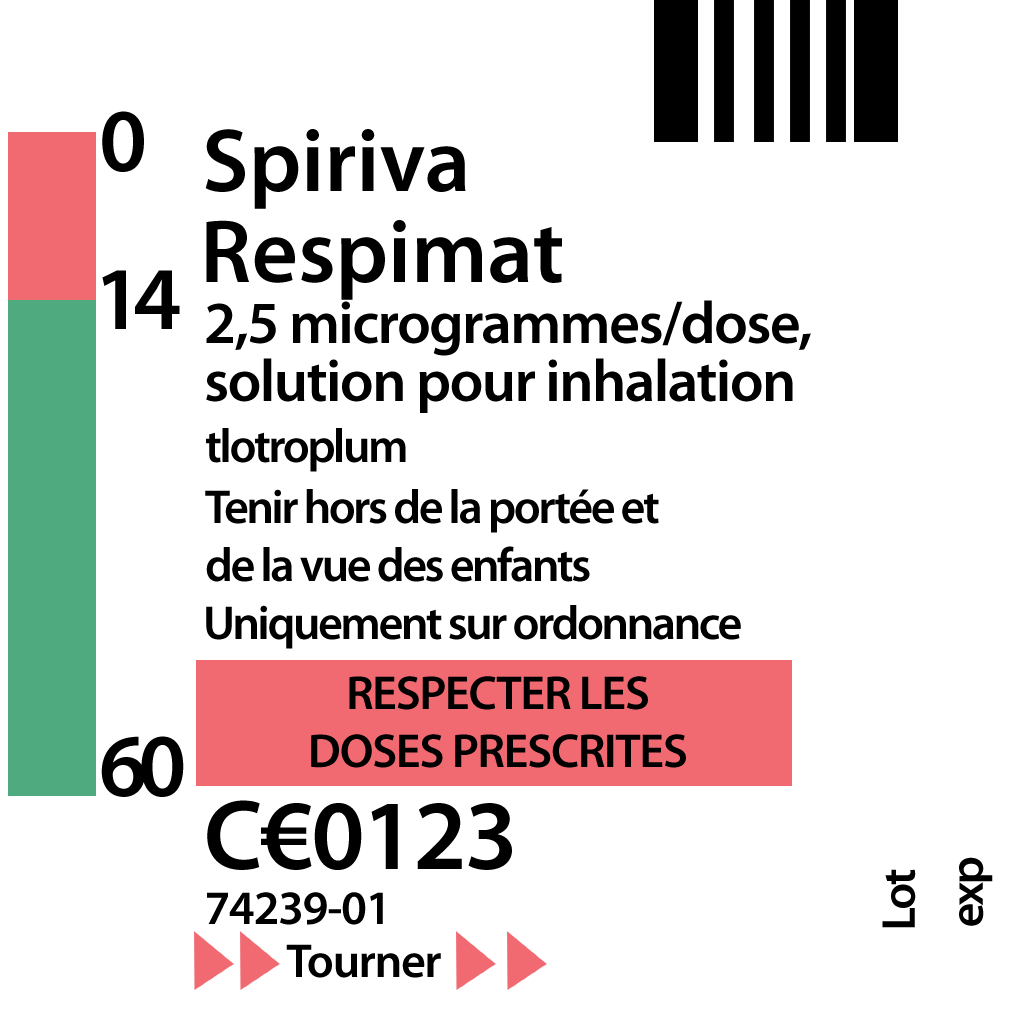
<style>
.page{position:relative;width:1024px;height:1024px;background:#ffffff}
.page>*{position:absolute;margin:0}
.t1{font:90px "MyriadPro-Semibold";color:#000000}
.t2{font:90px "MyriadPro-Semibold";letter-spacing:-0.1em;color:#000000}
.t3{font:60px/48px "MyriadPro-Semibold";letter-spacing:-0.025em;color:#000000}
.t4{font:48px "MyriadPro-Semibold";letter-spacing:-0.05em;color:#000000}
.t5{font:48px/48px "MyriadPro-Semibold";letter-spacing:-0.05em;color:#000000}
.t6{font:48px/48px "MyriadPro-Semibold";letter-spacing:-0.025em;color:#000000}
.t7{font:100px "MyriadPro-Semibold";letter-spacing:-0.025em;color:#000000}
.t8{font:48px "MyriadPro-Semibold";letter-spacing:-0.025em;color:#000000}
</style>
<div class="page">
<p class="t1" style="left:102px;top:111px;width:42px;height:61px">0</p>
<p class="t1" style="left:205px;top:129px;width:261px;height:80px">Spiriva</p>
<p class="t1" style="left:206px;top:220px;width:356px;height:80px">Respimat</p>
<p class="t2" style="left:102px;top:270px;width:78px;height:59px">14</p>
<p class="t3" style="left:206px;top:300px;width:605px;height:113px">2,5 microgrammes/dose,<br>solution pour inhalation</p>
<p class="t4" style="left:206px;top:428px;width:200px;height:44px">tlotroplum</p>
<p class="t5" style="left:205px;top:489px;width:454px;height:93px">Tenir hors de la portée et<br>de la vue des enfants</p>
<p class="t4" style="left:206px;top:605px;width:535px;height:44px">Uniquement sur ordonnance</p>
<p class="t6" style="left:311px;top:676px;width:375px;height:92px;text-align:center">RESPECTER LES<br>DOSES PRESCRITES</p>
<p class="t2" style="left:101px;top:736px;width:83px;height:61px">60</p>
<p class="t7" style="left:207px;top:800px;width:305px;height:70px">C€0123</p>
<p class="t4" style="left:959px;top:857px;width:34px;height:69px;rotate:-90deg">exp</p>
<p class="t4" style="left:882px;top:869px;width:34px;height:59px;rotate:-90deg">Lot</p>
<p class="t8" style="left:207px;top:892px;width:176px;height:33px">74239-01</p>
<p class="t8" style="left:286px;top:944px;width:155px;height:34px">Tourner</p>
</div>
